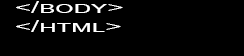
<style>
.page{position:relative;width:244px;height:56px;background:#000000}
.page>*{position:absolute;margin:0}
.t1{font:15.5px "ArialMT";color:#ffffff;font-variant:small-caps;scale:1.84 1}
</style>
<div class="page">
<p class="t1" style="left:16px;top:1px;width:107px;height:31px">&lt;/body&gt;<br>&lt;/html&gt;</p>
</div>
